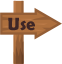
<style>
.page{position:relative;width:62px;height:64px;background:#ffffff}
.page>*{position:absolute;margin:0}
.t1{font:18px "BerlinSansFBDemi-Bold";color:#3e2626}
</style>
<div class="page">
<p class="t1" style="left:8px;top:17px;width:27px;height:14px">Use</p>
</div>
